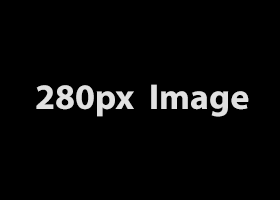
<style>
.page{position:relative;width:280px;height:200px;background:#000000}
.page>*{position:absolute;margin:0}
.t1{font:36px "MyriadPro-Bold";color:#e1e1e1}
</style>
<div class="page">
<p class="t1" style="left:36px;top:84px;width:213px;height:33px">280px  Image</p>
</div>
